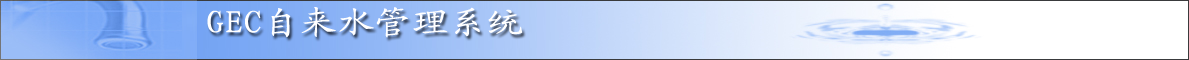
<style>
.page{position:relative;width:1189px;height:60px;background:#ffffff}
.page>*{position:absolute;margin:0}
.t1{font:31.7px "KaiTi_GB2312";color:#ffffff;scale:1.18 1}
</style>
<div class="page">
<p class="t1" style="left:207px;top:7px;width:316px;height:31px">GEC自来水管理系统</p>
</div>
